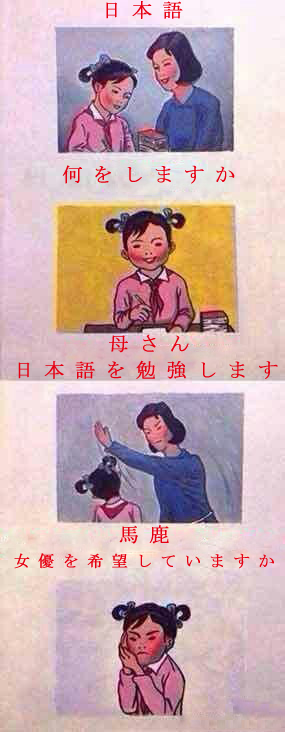
<style>
.page{position:relative;width:285px;height:732px}
.page>*{position:absolute;margin:0}
.t1{font:20px "MS-Mincho";letter-spacing:0.5em;color:#e60012;font-weight:bold}
.t2{font:16px "MS-Mincho";letter-spacing:0.5em;color:#e60012;font-weight:bold}
</style>
<div class="page">
<p class="t1" style="left:106px;top:1px;width:77px;height:18px">日本語</p>
<p class="t1" style="left:62px;top:165px;width:173px;height:19px">何をしますか</p>
<p class="t1" style="left:109px;top:334px;width:80px;height:19px">母さん</p>
<p class="t1" style="left:18px;top:360px;width:260px;height:19px">日本語を勉強します</p>
<p class="t1" style="left:119px;top:525px;width:50px;height:19px">馬鹿</p>
<p class="t2" style="left:14px;top:553px;width:260px;height:16px">女優を希望していますか</p>
</div>
